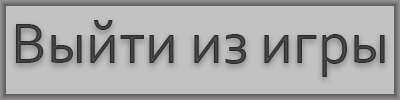
<style>
.page{position:relative;width:400px;height:100px;background:#c2c2c2}
.page>*{position:absolute;margin:0}
.t1{font:60px "Corbel";color:#4e4c4c}
</style>
<div class="page">
<p class="t1" style="left:16px;top:20px;width:369px;height:57px">Выйти из игры</p>
</div>
